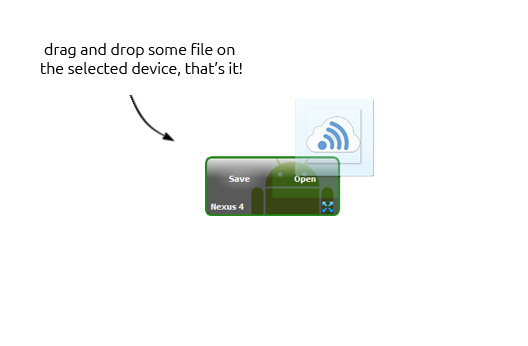
<style>
.page{position:relative;width:528px;height:346px;background:#ffffff}
.page>*{position:absolute;margin:0}
.t1{font:16px "Ubuntu-Light";color:#000000}
</style>
<div class="page">
<p class="t1" style="left:41px;top:43px;width:201px;height:33px;text-align:center">drag and drop some file on <br>the selected device, that’s it!</p>
</div>
